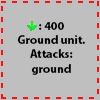
<style>
.page{position:relative;width:100px;height:100px;background:#bfbfbf}
.page>*{position:absolute;margin:0}
.t1{font:12px "MyriadPro-Bold";color:#000000}
</style>
<div class="page">
<p class="t1" style="left:17px;top:22px;width:68px;height:53px;text-align:center">: 400<br>Ground unit.<br>Attacks: ground</p>
</div>
